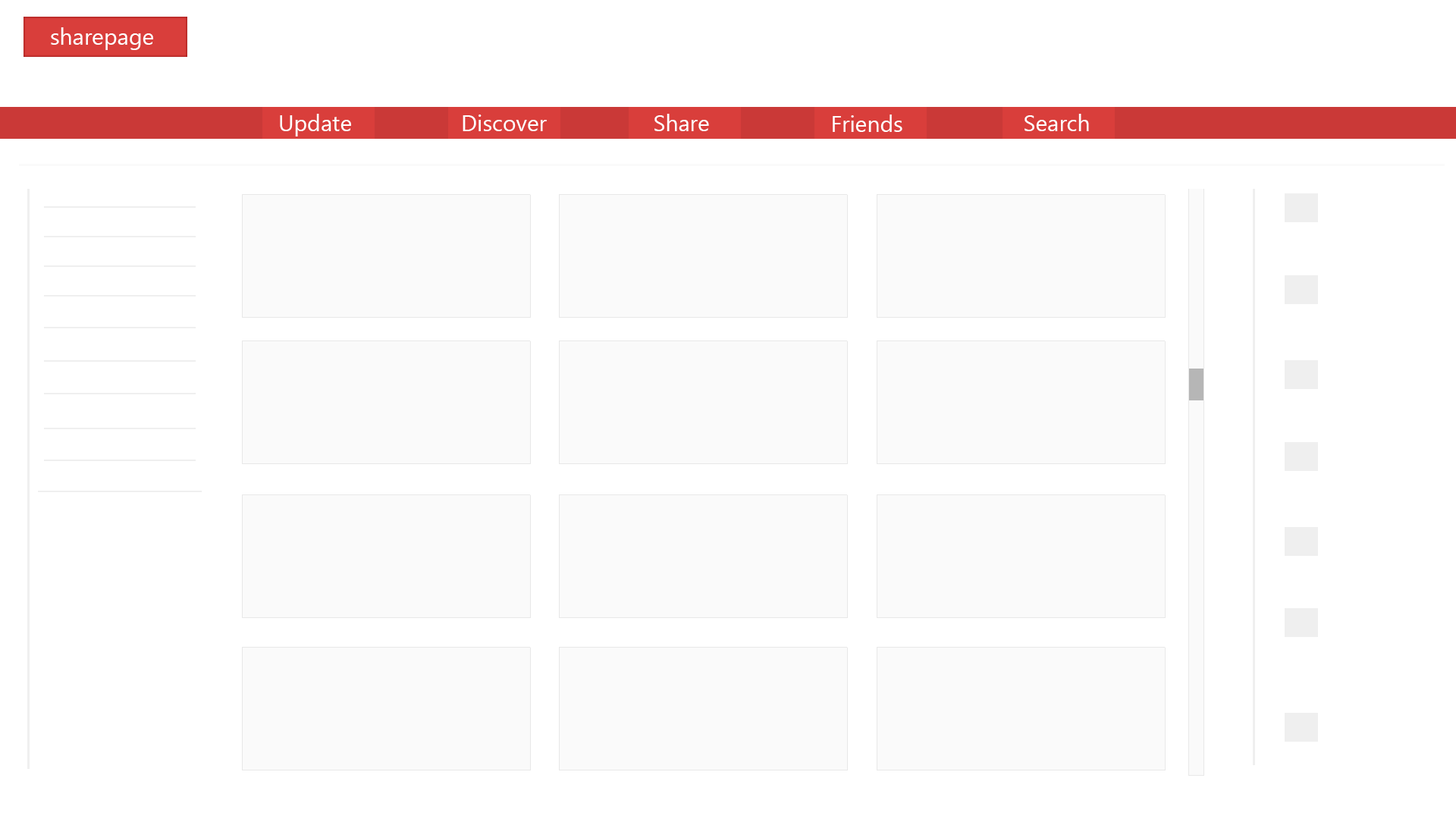
<style>
.page{position:relative;width:1456px;height:819px;background:#ffffff}
.page>*{position:absolute;margin:0}
.t1{font:22.7px "MicrosoftTaiLe";color:#ffffff}
</style>
<div class="page">
<p class="t1" style="left:280px;top:114px;width:71px;height:22px">Update</p>
<p class="t1" style="left:654px;top:114px;width:55px;height:17px">Share</p>
<p class="t1" style="left:1024px;top:114px;width:65px;height:17px">Search</p>
<p class="t1" style="left:463px;top:115px;width:84px;height:16px">Discover</p>
<p class="t1" style="left:833px;top:115px;width:69px;height:17px">Friends</p>
</div>
